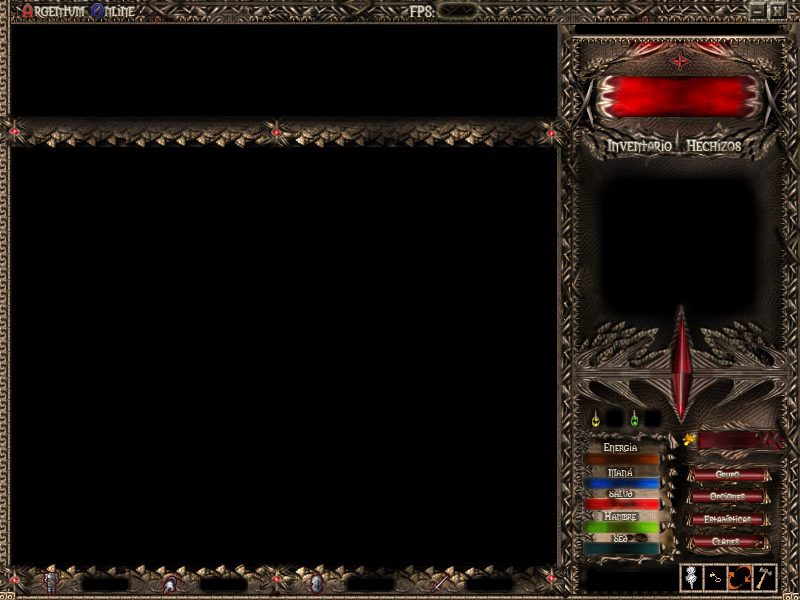
<style>
.page{position:relative;width:800px;height:600px;background:#000000}
.page>*{position:absolute;margin:0}
.t1{font:17px "Morpheus";color:#ca3030}
.t2{font:14px "Morpheus";color:#d8d2bd}
.t3{font:17px "Morpheus";color:#1419b3}
.t4{font:12px "Morpheus"}
.t5{font:10px "Morpheus";color:#d8d2bd}
.t6{font:9px "Morpheus"}
</style>
<div class="page">
<p class="t1" style="left:21px;top:4px;width:13px;height:13px">A</p>
<p class="t2" style="left:34px;top:5px;width:51px;height:13px">rgentum</p>
<p class="t3" style="left:92px;top:4px;width:11px;height:13px">O</p>
<p class="t2" style="left:104px;top:5px;width:31px;height:13px">nline</p>
<p class="t2" style="left:409px;top:6px;width:26px;height:11px">FPS:</p>
<p class="t4" style="left:773px;top:7px;width:9px;height:9px">X</p>
<p class="t5" style="left:603px;top:443px;width:35px;height:10px">Energia</p>
<p class="t5" style="left:608px;top:468px;width:25px;height:10px">Maná</p>
<p class="t6" style="left:716px;top:471px;width:23px;height:8px">Grupo</p>
<p class="t5" style="left:609px;top:489px;width:24px;height:8px">Salud</p>
<p class="t6" style="left:710px;top:493px;width:35px;height:9px">Opciones</p>
<p class="t5" style="left:604px;top:512px;width:33px;height:10px">Hambre</p>
<p class="t6" style="left:704px;top:515px;width:47px;height:8px">Estadísticas</p>
<p class="t5" style="left:614px;top:534px;width:14px;height:8px">Sed</p>
<p class="t6" style="left:712px;top:538px;width:27px;height:9px">Clanes</p>
</div>
